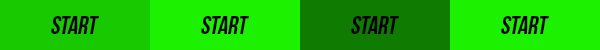
<style>
.page{position:relative;width:600px;height:50px;background:#1cf100}
.page>*{position:absolute;margin:0}
.t1{font:25.4px "BebasNeue";letter-spacing:-0.009em;color:#000000;font-style:italic}
</style>
<div class="page">
<p class="t1" style="left:51px;top:16px;width:48px;height:18px">Start</p>
<p class="t1" style="left:201px;top:16px;width:48px;height:18px">Start</p>
<p class="t1" style="left:351px;top:16px;width:48px;height:18px">Start</p>
<p class="t1" style="left:501px;top:16px;width:48px;height:18px">Start</p>
</div>
